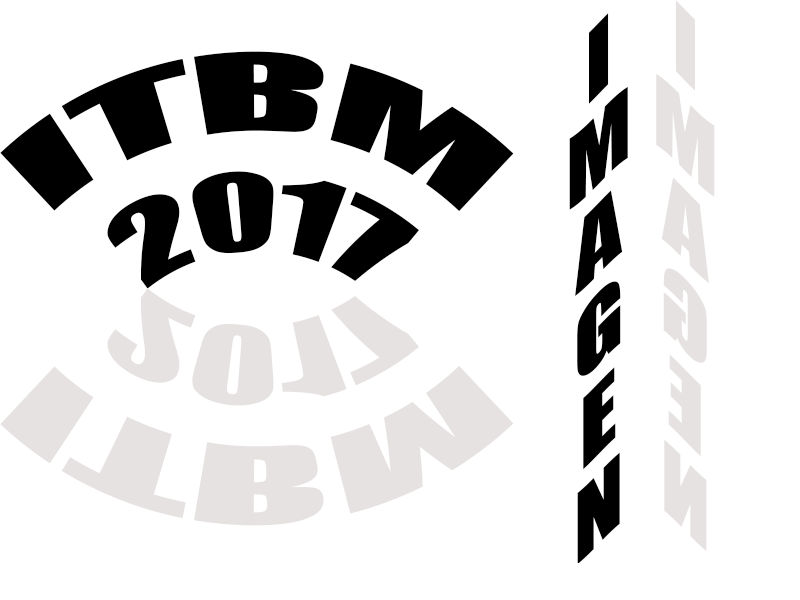
<style>
.page{position:relative;width:800px;height:600px;background:#ffffff}
.page>*{position:absolute;margin:0}
.t1{font:90px "Impact";color:#e6e2e2}
.t2{font:90px "Impact";color:#000000}
.t3{font:100px "Impact";color:#000000}
.t4{font:100px "Impact";color:#e6e2e2}
</style>
<div class="page">
<p class="t1" style="left:656px;top:0px;width:59px;height:551px;rotate:-180deg">IMAGEN</p>
<p class="t2" style="left:569px;top:13px;width:59px;height:550px;text-align:center">IMAGEN</p>
<p class="t3" style="left:0px;top:51px;width:514px;height:238px;text-align:center">ITBM<br>2017</p>
<p class="t4" style="left:0px;top:288px;width:514px;height:238px;text-align:center">ITBM<br>2017</p>
</div>
